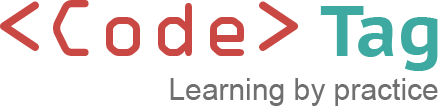
<style>
.page{position:relative;width:438px;height:106px;background:#ffffff}
.page>*{position:absolute;margin:0}
.t1{font:72px "OCRAStd";color:#c94843}
.t2{font:72px "PTSans-CaptionBold";color:#3ea9a1}
.t3{font:30px "ArialMT";color:#6f6f6f}
</style>
<div class="page">
<p class="t1" style="left:0px;top:0px;width:438px;height:71px">&lt;Code&gt; <span class="t2">Tag</span></p>
<p class="t3" style="left:170px;top:78px;width:268px;height:28px">Learning by practice</p>
</div>
